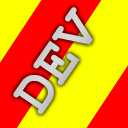
<style>
.page{position:relative;width:128px;height:128px;background:#fcff00}
.page>*{position:absolute;margin:0}
.t1{font:60px "CourierNewPS-BoldMT";color:#cfcfcf}
</style>
<div class="page">
<p class="t1" style="left:13px;top:7px;width:80px;height:108px;rotate:-56deg">DEV</p>
</div>
